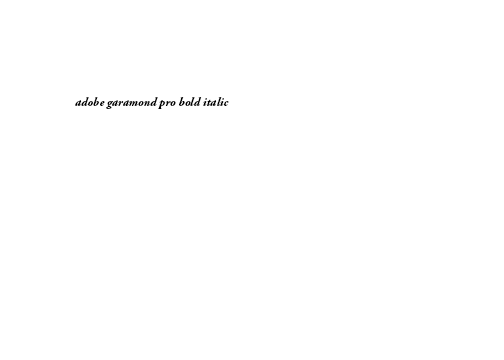
<style>
.page{position:relative;width:504px;height:360px;background:#ffffff}
.page>*{position:absolute;margin:0}
.t1{font:12px "AGaramondPro-BoldItalic";color:#000000}
</style>
<div class="page">
<p class="t1" style="left:75px;top:97px;width:154px;height:12px">adobe garamond pro bold italic</p>
</div>
